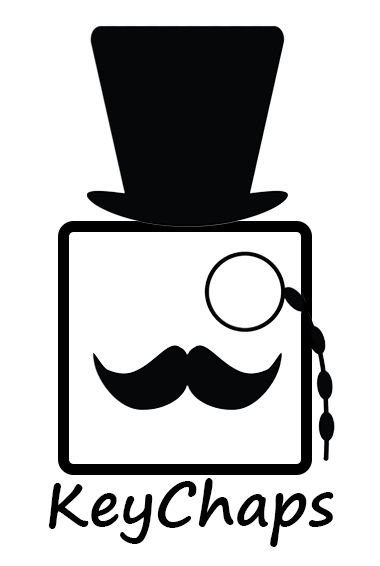
<style>
.page{position:relative;width:380px;height:566px;background:#ffffff}
.page>*{position:absolute;margin:0}
.t1{font:60px "SegoePrint-Bold";color:#010101}
</style>
<div class="page">
<p class="t1" style="left:48px;top:478px;width:286px;height:69px">KeyChaps</p>
</div>
